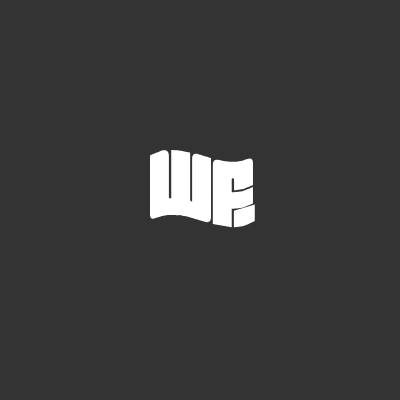
<style>
.page{position:relative;width:400px;height:400px;background:#333333}
.page>*{position:absolute;margin:0}
.t1{font:90px "Pincoyablack-Black";color:#ffffff}
</style>
<div class="page">
<p class="t1" style="left:150px;top:149px;width:105px;height:79px">wf</p>
</div>
